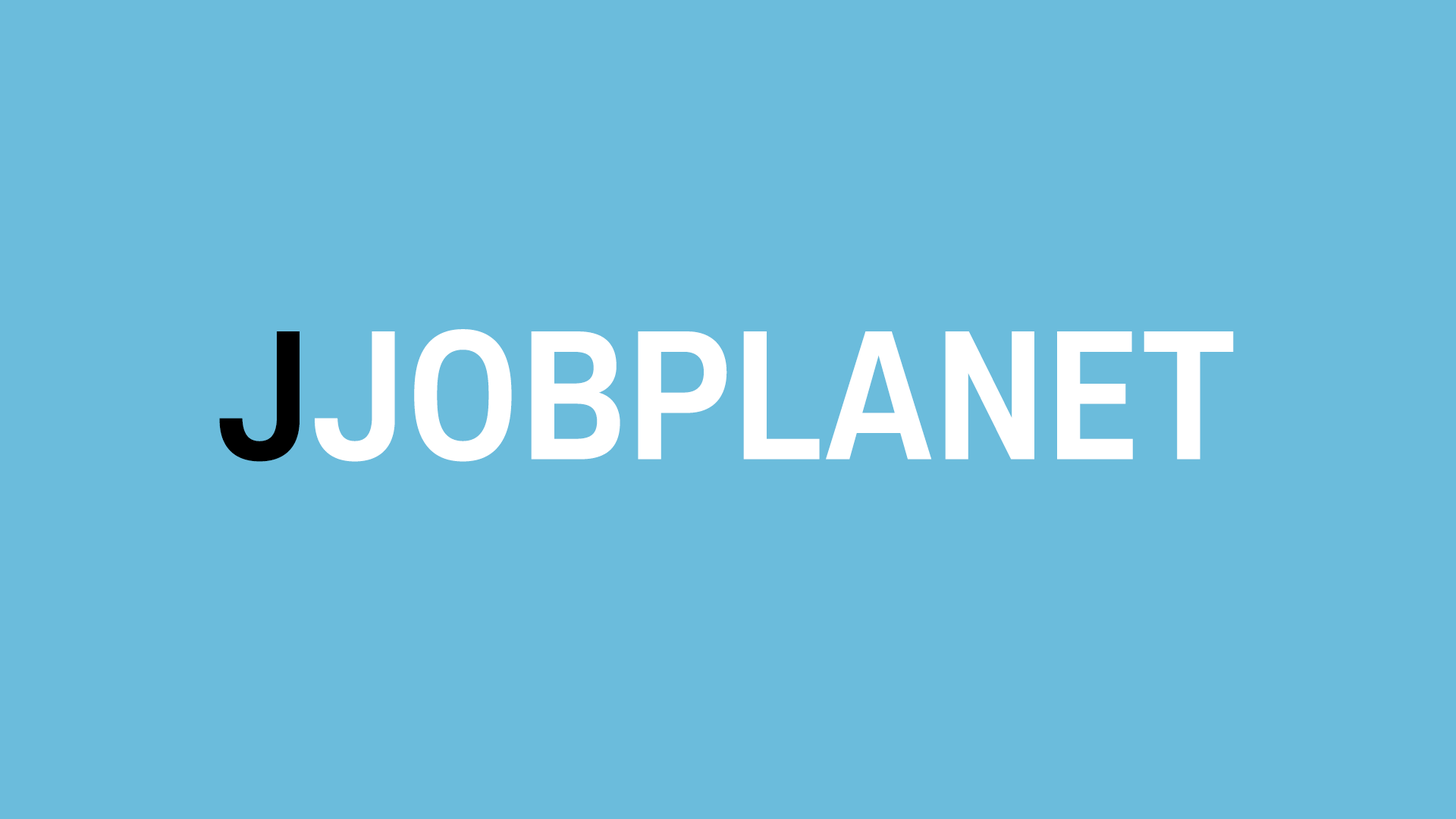
<style>
.page{position:relative;width:1456px;height:819px;background:#6bbcdc}
.page>*{position:absolute;margin:0}
.t1{font:161.2px "S-CoreDream-6Bold";letter-spacing:0.02em;color:#ffffff;scale:0.96 1}
.t2{font:161.2px "S-CoreDream-6Bold";letter-spacing:0.02em;color:#000000;scale:0.96 1}
</style>
<div class="page">
<p class="t1" style="left:219px;top:329px;width:1015px;height:133px"><span class="t2">J</span>JOBPLANET</p>
</div>
